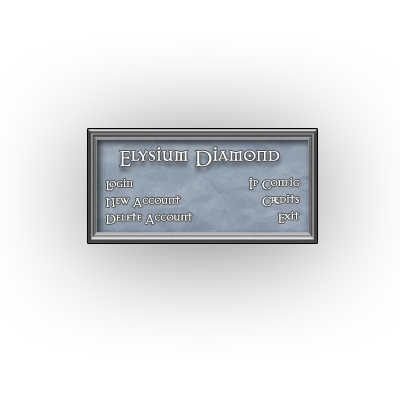
<style>
.page{position:relative;width:400px;height:400px;background:#ffffff}
.page>*{position:absolute;margin:0}
.t1{font:24px "Dark11";color:#ffffff}
.t2{font:14px "Dark11";color:#ffffff}
</style>
<div class="page">
<p class="t1" style="left:119px;top:147px;width:161px;height:20px">Elysium Diamond</p>
<p class="t2" style="left:106px;top:178px;width:87px;height:47px">Login<br>New Account<br>Delete Account</p>
<p class="t2" style="left:249px;top:177px;width:51px;height:46px;text-align:right">Ip Config<br>Credits<br>Exit</p>
</div>
